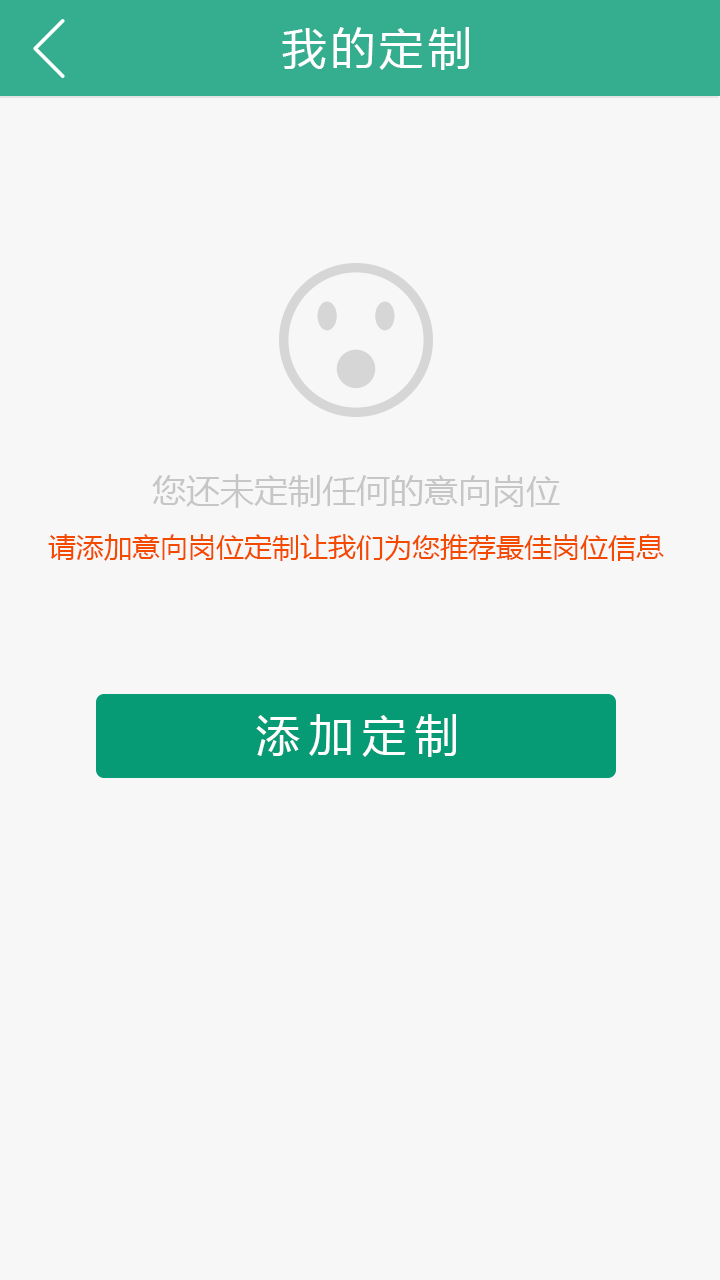
<style>
.page{position:relative;width:720px;height:1280px;background:#f7f7f7}
.page>*{position:absolute;margin:0}
.t1{font:44px "MicrosoftYaHei";letter-spacing:0.1em;color:#ffffff}
.t2{font:28px "MicrosoftYaHei";color:#f34a00}
.t3{font:34px "MicrosoftYaHei";color:#c6c6c6}
.t4{font:44px "MicrosoftYaHei";letter-spacing:0.2em;color:#ffffff}
</style>
<div class="page">
<p class="t1" style="left:282px;top:27px;width:187px;height:43px">我的定制</p>
<p class="t2" style="left:48px;top:474px;width:616px;height:87px;text-align:center"><span class="t3">您还未定制任何的意向岗位<br></span>请添加意向岗位定制让我们为您推荐最佳岗位信息</p>
<p class="t4" style="left:256px;top:714px;width:200px;height:43px">添加定制</p>
</div>
